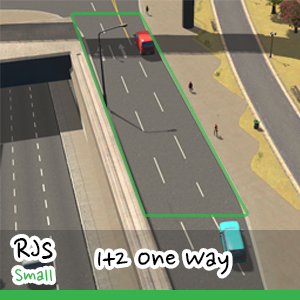
<style>
.page{position:relative;width:300px;height:300px}
.page>*{position:absolute;margin:0}
.t1{font:36.3px "NanumPen";color:#000000}
.t2{font:32px "NanumPen";color:#000000}
.t3{font:21.5px "NanumPen";color:#37b24d}
</style>
<div class="page">
<p class="t1" style="left:13px;top:238px;width:40px;height:21px">RJs</p>
<p class="t2" style="left:98px;top:252px;width:131px;height:23px">1+2 One Way</p>
<p class="t3" style="left:15px;top:269px;width:38px;height:13px">Small</p>
</div>
